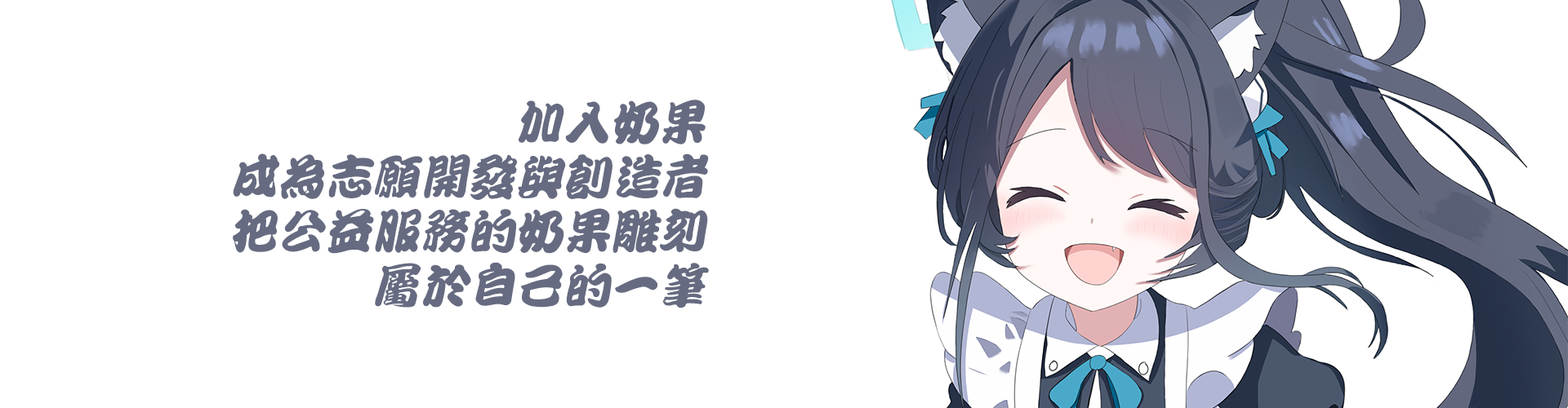
<style>
.page{position:relative;width:1568px;height:408px;background:#ffffff}
.page>*{position:absolute;margin:0}
.t1{font:47.6px/54.4px "HanWangKanTan";color:#666b81;font-style:italic}
</style>
<div class="page">
<p class="t1" style="left:233px;top:100px;width:476px;height:209px;text-align:right">加入奶果<br>成為志願開發與創造者<br>把公益服務的奶果雕刻<br>屬於自己的一筆</p>
</div>
